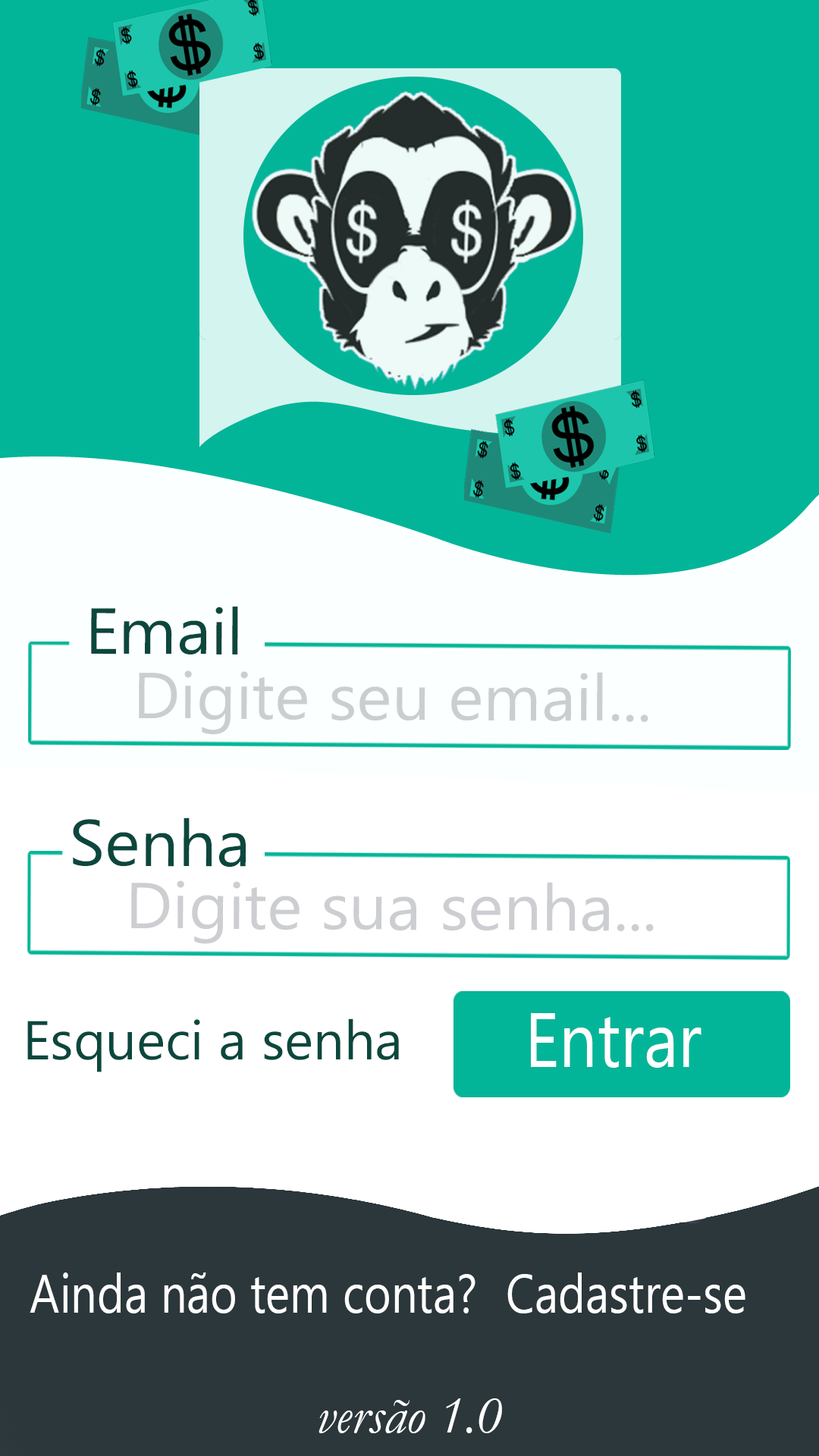
<style>
.page{position:relative;width:819px;height:1456px;background:#03b598}
.page>*{position:absolute;margin:0}
.t1{font:64.9px "MicrosoftNewTaiLue";color:#0b473d;scale:1.04 1}
.t2{font:64.9px "MicrosoftNewTaiLue";color:#cbced1;scale:1.04 1}
.t3{font:64.9px "MicrosoftNewTaiLue";color:#ccced1;scale:1.04 1}
.t4{font:77.3px "MicrosoftNewTaiLue";color:#ffffff;scale:0.87 1}
.t5{font:54.6px "MicrosoftNewTaiLue";color:#0b473d}
.t6{font:54.6px "MicrosoftNewTaiLue";color:#ffffff;scale:0.85 1}
.t7{font:54.6px "Garamond-Italic";color:#ffffff}
</style>
<div class="page">
<p class="t1" style="left:91px;top:606px;width:147px;height:48px">Email</p>
<p class="t2" style="left:139px;top:670px;width:509px;height:65px">Digite seu email...</p>
<p class="t1" style="left:73px;top:817px;width:173px;height:50px">Senha</p>
<p class="t3" style="left:131px;top:880px;width:523px;height:64px">Digite sua senha...</p>
<p class="t4" style="left:531px;top:1013px;width:170px;height:55px">Entrar</p>
<p class="t5" style="left:27px;top:1018px;width:372px;height:54px">Esqueci a senha</p>
<p class="t6" style="left:30px;top:1272px;width:445px;height:41px">Ainda não tem conta?</p>
<p class="t6" style="left:507px;top:1272px;width:238px;height:41px">Cadastre-se</p>
<p class="t7" style="left:318px;top:1398px;width:184px;height:35px">versão 1.0</p>
</div>
